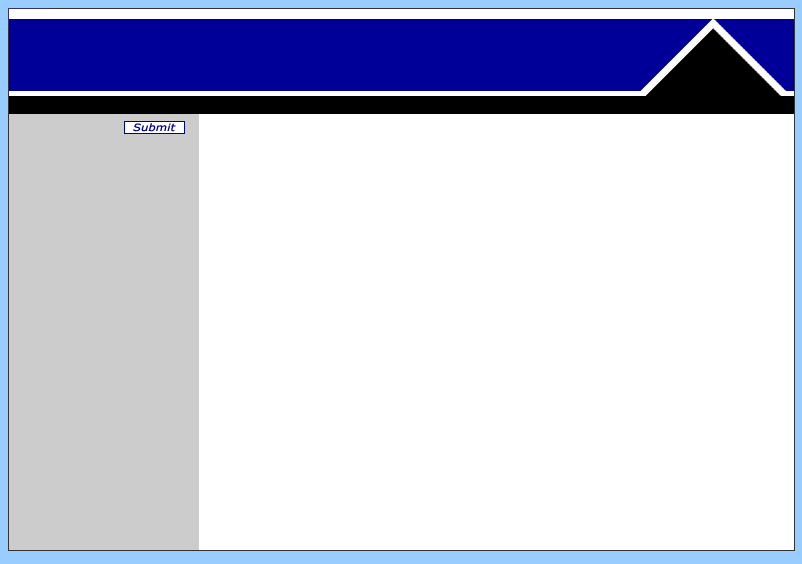
<style>
.page{position:relative;width:802px;height:564px;background:#ffffff}
.page>*{position:absolute;margin:0}
.t1{font:10px "Verdana-Italic";letter-spacing:0.018em;color:#000099;scale:1.15 1}
</style>
<div class="page">
<p class="t1" style="left:133px;top:123px;width:43px;height:9px">Submit</p>
</div>
